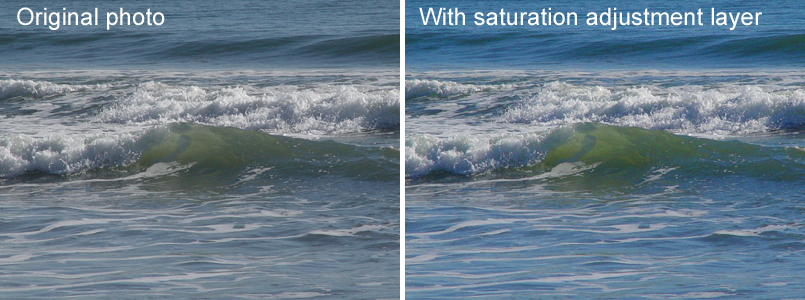
<style>
.page{position:relative;width:805px;height:300px}
.page>*{position:absolute;margin:0}
.t1{font:24px "ArialMT";color:#ffffff}
</style>
<div class="page">
<p class="t1" style="left:17px;top:7px;width:148px;height:23px">Original photo</p>
<p class="t1" style="left:419px;top:7px;width:344px;height:23px">With saturation adjustment layer</p>
</div>
